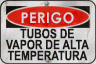
<style>
.page{position:relative;width:96px;height:64px}
.page>*{position:absolute;margin:0}
.t1{font:14.6px "CenturyGothic-Bold";letter-spacing:0.05em;color:#d6d7d6;text-transform:uppercase;scale:0.95 1}
.t2{font:13px/11px "Arial-BoldMT";color:#1d1915;text-transform:uppercase;scale:0.81 1}
</style>
<div class="page">
<p class="t1" style="left:21px;top:12px;width:53px;height:12px">perigo</p>
<p class="t2" style="left:6px;top:28px;width:83px;height:33px;text-align:center">tubos de<br>vapor de alta<br>temperatura</p>
</div>
